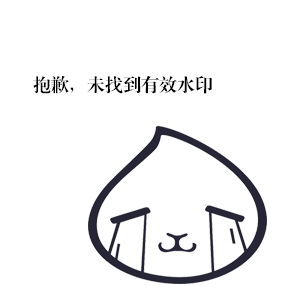
<style>
.page{position:relative;width:300px;height:300px;background:#ffffff}
.page>*{position:absolute;margin:0}
.t1{font:18px "CTBiaoSongSJ";color:#000000}
</style>
<div class="page">
<p class="t1" style="left:33px;top:76px;width:180px;height:18px">抱歉，未找到有效水印</p>
</div>
